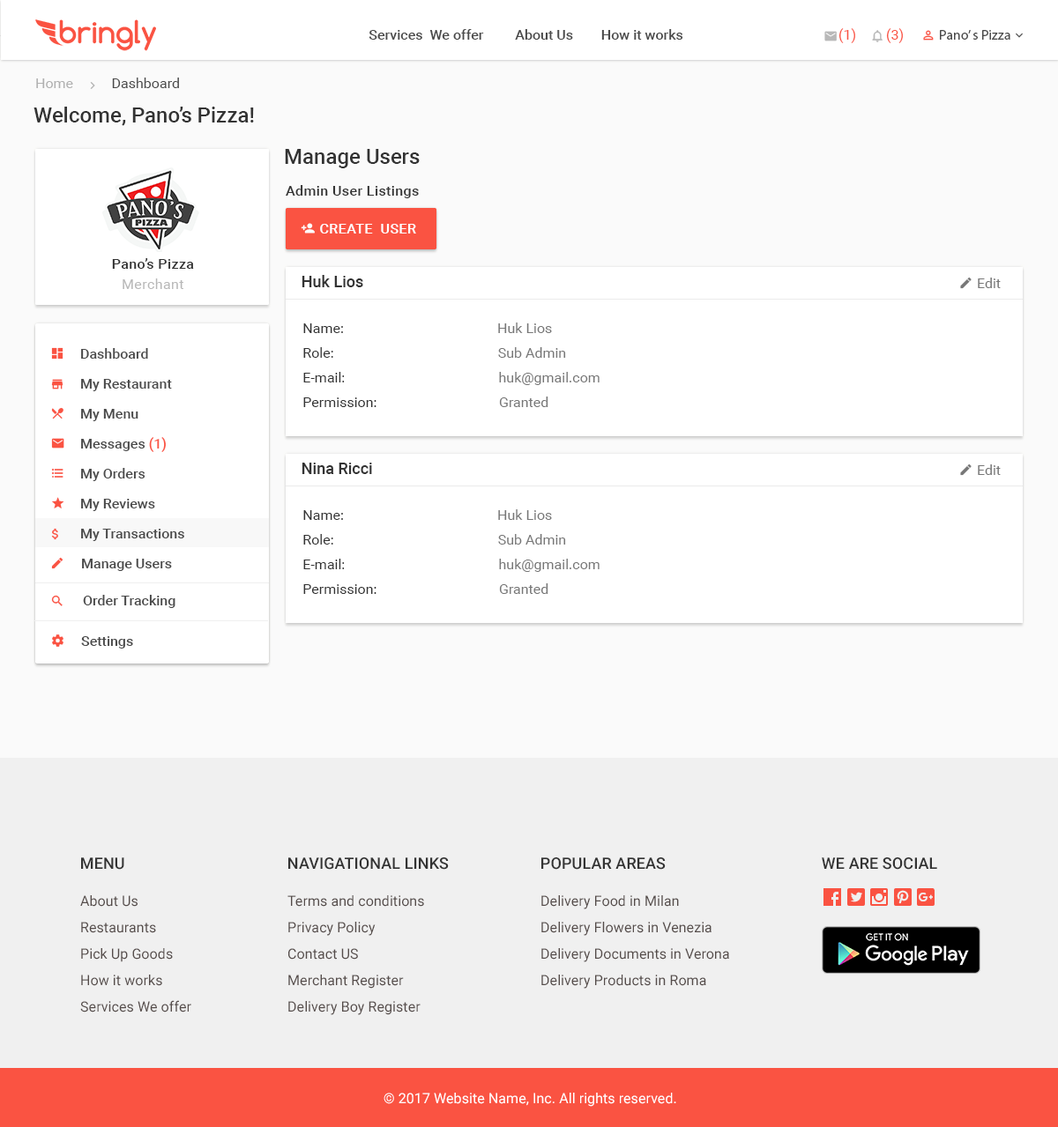
<style>
.page{position:relative;width:1058px;height:1127px;background:#ffffff}
.page>*{position:absolute;margin:0}
.t1{font:14.1px "Roboto-Medium";color:#4a4a4a}
.t2{font:14.1px "Roboto-Regular";color:#fa5342}
.t3{font:14.1px "MyriadPro-Regular";color:#4a4a4a}
.t4{font:14.1px "Roboto-Regular";color:#4a4a4a}
.t5{font:14.1px "Roboto-Regular";color:#b0b0b0}
.t6{font:21.2px "Roboto-Medium";color:#333333}
.t7{font:14.1px "Roboto-Medium";letter-spacing:0.025em;color:#333333}
.t8{font:14.1px "Roboto-Medium";letter-spacing:0.025em;color:#fefefe;text-transform:uppercase}
.t9{font:14.1px "Roboto-Regular";letter-spacing:0.025em;color:#b8b8b8}
.t10{font:15.9px "Roboto-Medium";color:#333333}
.t11{font:14.1px "Roboto-Regular";color:#777777}
.t12{font:14.1px/24.7px "Roboto-Regular";color:#777777}
.t13{font:14.1px/24.7px "Roboto-Regular";color:#333333}
.t14{font:14.1px/30px "Roboto-Medium";color:#4a4a4a}
.t15{font:14.1px/30px "Roboto-Medium";color:#fa5342}
.t16{font:15.9px "Roboto-Medium";letter-spacing:0.005em;color:#333333}
.t17{font:15.9px "Roboto-Medium";letter-spacing:0.005em;color:#333333;text-transform:uppercase}
.t18{font:14.1px/26.4px "Roboto-Regular";letter-spacing:0.005em;color:#554c4a}
.t19{font:14.1px "Roboto-Regular";letter-spacing:0.005em;color:#ffffff}
</style>
<div class="page">
<p class="t1" style="left:368px;top:29px;width:315px;height:11px">Services  We offer         About Us        How it works</p>
<p class="t2" style="left:838px;top:28px;width:17px;height:15px">(1)</p>
<p class="t2" style="left:886px;top:28px;width:17px;height:15px">(3)</p>
<p class="t3" style="left:940px;top:30px;width:70px;height:10px">Pano’ s Pizza</p>
<p class="t4" style="left:36px;top:78px;width:143px;height:10px"><span class="t5">Home           </span>Dashboard</p>
<p class="t6" style="left:33px;top:107px;width:221px;height:19px">Welcome, Pano’s Pizza!</p>
<p class="t6" style="left:285px;top:149px;width:135px;height:19px">Manage Users</p>
<p class="t7" style="left:286px;top:185px;width:133px;height:13px">Admin User Listings</p>
<p class="t8" style="left:320px;top:224px;width:96px;height:10px">Create  user</p>
<p class="t7" style="left:112px;top:258px;width:82px;height:11px">Pano’s Pizza</p>
<p class="t9" style="left:123px;top:279px;width:60px;height:10px">Merchant</p>
<p class="t10" style="left:301px;top:275px;width:62px;height:12px">Huk Lios</p>
<p class="t11" style="left:978px;top:278px;width:22px;height:10px">Edit</p>
<p class="t12" style="left:303px;top:323px;width:296px;height:84px"><span class="t13">Name:                                          </span>  Huk Lios<br><span class="t13">Role:                                               </span>Sub Admin    <br><span class="t13">E-mail:                                            </span>huk@gmail.com <br><span class="t13">Permission: </span>                                  Granted</p>
<p class="t14" style="left:81px;top:348px;width:103px;height:193px">Dashboard<br>My Restaurant<br>My Menu<br>Messages <span class="t15">(1)<br></span>My Orders<br>My Reviews<br>My Transactions</p>
<p class="t10" style="left:301px;top:463px;width:71px;height:11px">Nina Ricci</p>
<p class="t11" style="left:978px;top:465px;width:22px;height:10px">Edit</p>
<p class="t12" style="left:303px;top:509px;width:296px;height:85px"><span class="t13">Name:                                          </span>  Huk Lios<br><span class="t13">Role:                                               </span>Sub Admin    <br><span class="t13">E-mail:                                            </span>huk@gmail.com <br><span class="t13">Permission: </span>                                  Granted</p>
<p class="t1" style="left:82px;top:559px;width:90px;height:12px">Manage Users</p>
<p class="t1" style="left:83px;top:595px;width:92px;height:13px">Order Tracking</p>
<p class="t1" style="left:81px;top:636px;width:52px;height:13px">Settings</p>
<p class="t16" style="left:81px;top:858px;width:43px;height:12px">MENU</p>
<p class="t17" style="left:288px;top:858px;width:161px;height:12px">Navigational Links</p>
<p class="t17" style="left:541px;top:858px;width:124px;height:12px">Popular Areas</p>
<p class="t17" style="left:821px;top:858px;width:116px;height:12px">We are social</p>
<p class="t18" style="left:80px;top:896px;width:111px;height:117px">About Us<br>Restaurants<br>Pick Up Goods <br>How it works <br>Services We offer</p>
<p class="t18" style="left:287px;top:896px;width:137px;height:119px">Terms and conditions<br>Privacy Policy<br>Contact US <br>Merchant Register <br>Delivery Boy Register</p>
<p class="t18" style="left:541px;top:896px;width:188px;height:93px">Delivery Food in Milan<br>Delivery Flowers in Venezia<br>Delivery Documents in Verona<br>Delivery Products in Roma</p>
<p class="t19" style="left:383px;top:1093px;width:293px;height:14px">© 2017 Website Name, Inc. All rights reserved.</p>
</div>
